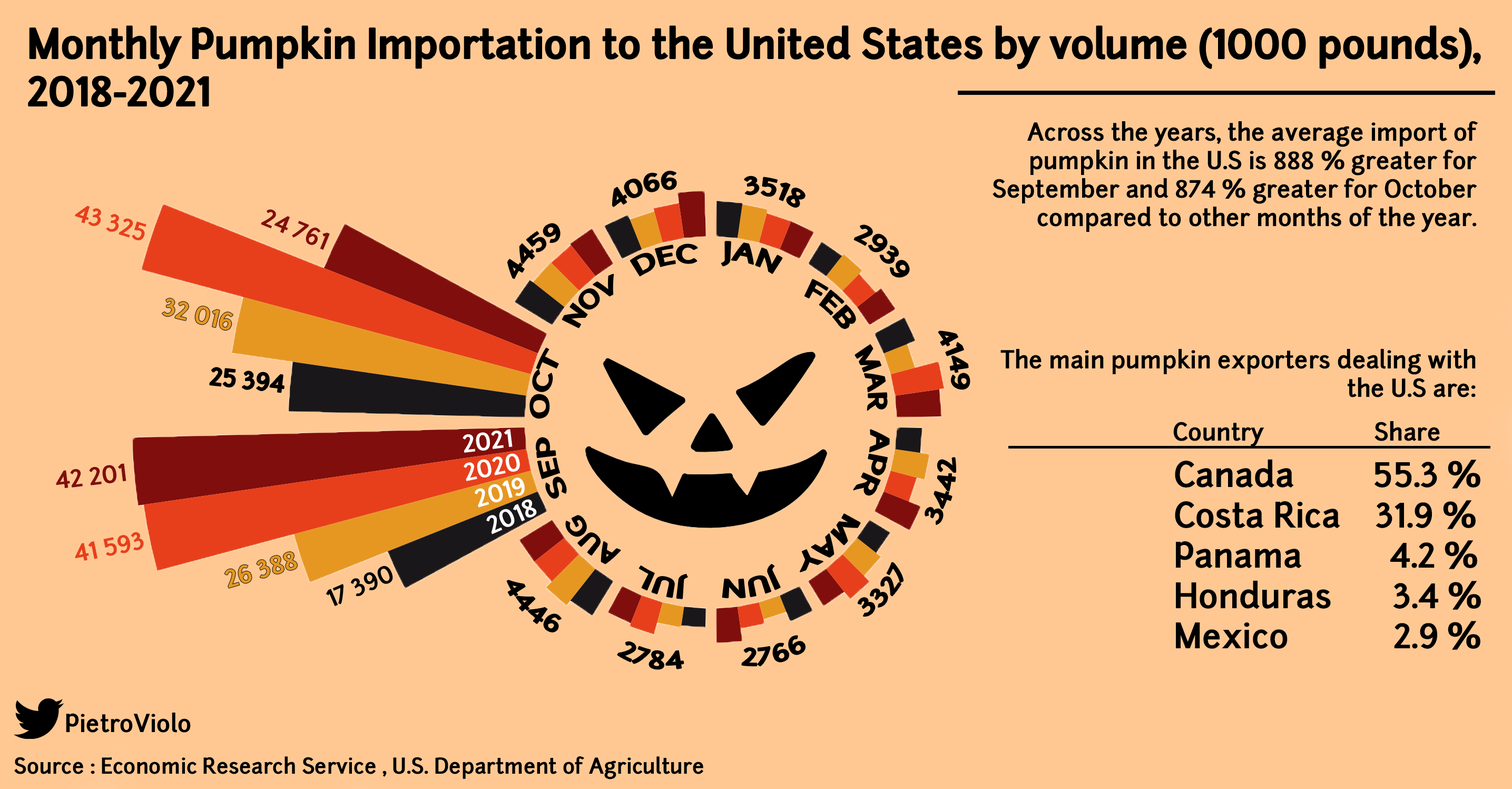
<style>
.page{position:relative;width:1512px;height:789px;background:#ffc893}
.page>*{position:absolute;margin:0}
.t1{font:39.5px "Junction-Bold";color:#000000}
.t2{font:23.7px "Junction-Bold";color:#000000}
.t3{font:23.7px "Junction-Bold";color:#e73f1b}
.t4{font:23.7px "Junction-Bold";color:#800e0c}
.t5{font:23.7px "Junction-Bold";color:#e69722}
.t6{font:23.7px "Junction-Bold";color:#ffffff}
.t7{font:33.6px "Junction-Bold";color:#000000}
.t8{font:21.1px "Junction-Bold";color:#000000}
</style>
<div class="page">
<p class="t1" style="left:28px;top:26px;width:1452px;height:80px">Monthly Pumpkin Importation to the United States by volume (1000 pounds),<br>2018-2021</p>
<p class="t2" style="left:993px;top:121px;width:485px;height:276px;text-align:right">Across the years, the average import of pumpkin in the U.S is 888 % greater for September and 874 % greater for October compared to other months of the year.<br><br><br><br><br>The main pumpkin exporters dealing with the U.S are:</p>
<p class="t2" style="left:612px;top:171px;width:64px;height:36px;rotate:-19deg">4066</p>
<p class="t2" style="left:744px;top:176px;width:61px;height:31px;rotate:16deg">3518</p>
<p class="t3" style="left:75px;top:205px;width:71px;height:35px;rotate:17deg">43 325</p>
<p class="t4" style="left:261px;top:209px;width:69px;height:41px;rotate:22deg">24 761</p>
<p class="t2" style="left:507px;top:223px;width:53px;height:56px;rotate:-43deg">4459</p>
<p class="t2" style="left:854px;top:225px;width:55px;height:52px;rotate:45deg">2939</p>
<p class="t2" style="left:630px;top:244px;width:68px;height:32px;rotate:-15deg">DEC</p>
<p class="t2" style="left:721px;top:241px;width:61px;height:32px;rotate:12deg">JAN</p>
<p class="t2" style="left:562px;top:274px;width:52px;height:54px;rotate:-42deg">NOV</p>
<p class="t2" style="left:804px;top:279px;width:52px;height:50px;rotate:38deg">FEB</p>
<p class="t5" style="left:162px;top:298px;width:71px;height:32px;rotate:13deg">32 016</p>
<p class="t2" style="left:938px;top:331px;width:32px;height:58px;rotate:74deg">4149</p>
<p class="t2" style="left:530px;top:348px;width:28px;height:70px;rotate:-80deg">OCT</p>
<p class="t2" style="left:855px;top:345px;width:32px;height:65px;rotate:77deg">MAR</p>
<p class="t2" style="left:210px;top:367px;width:74px;height:25px;rotate:6deg">25 394</p>
<p class="t2" style="left:1173px;top:421px;width:267px;height:26px">Country                  Share</p>
<p class="t6" style="left:463px;top:429px;width:50px;height:24px;rotate:-7deg">2021</p>
<p class="t2" style="left:536px;top:437px;width:30px;height:61px;rotate:-108deg">SEP</p>
<p class="t2" style="left:853px;top:429px;width:36px;height:66px;rotate:104deg">APR</p>
<p class="t6" style="left:464px;top:453px;width:56px;height:28px;rotate:-12deg">2020</p>
<p class="t2" style="left:925px;top:457px;width:31px;height:68px;rotate:-76deg">3442</p>
<p class="t7" style="left:1175px;top:459px;width:306px;height:191px">Canada         55.3 %<br>Costa Rica    31.9 %<br>Panama          4.2 %<br>Honduras       3.4 %<br>Mexico            2.9 %</p>
<p class="t4" style="left:56px;top:463px;width:70px;height:25px;rotate:-7deg">42 201</p>
<p class="t6" style="left:475px;top:477px;width:50px;height:30px;rotate:-16deg">2019</p>
<p class="t6" style="left:486px;top:499px;width:51px;height:35px;rotate:-24deg">2018</p>
<p class="t2" style="left:566px;top:515px;width:55px;height:49px;rotate:-137deg">AUG</p>
<p class="t2" style="left:800px;top:514px;width:60px;height:58px;rotate:140deg">MAY</p>
<p class="t3" style="left:75px;top:532px;width:69px;height:29px;rotate:-12deg">41 593</p>
<p class="t5" style="left:225px;top:552px;width:72px;height:36px;rotate:-16deg">26 388</p>
<p class="t2" style="left:326px;top:565px;width:67px;height:41px;rotate:-24deg">17 390</p>
<p class="t2" style="left:639px;top:565px;width:49px;height:33px;rotate:-168deg">JUL</p>
<p class="t2" style="left:722px;top:564px;width:58px;height:33px;rotate:166deg">JUN</p>
<p class="t2" style="left:858px;top:562px;width:45px;height:54px;rotate:-48deg">3327</p>
<p class="t2" style="left:507px;top:580px;width:54px;height:52px;rotate:44deg">4446</p>
<p class="t2" style="left:617px;top:641px;width:67px;height:28px;rotate:11deg">2784</p>
<p class="t2" style="left:742px;top:635px;width:64px;height:31px;rotate:-15deg">2766</p>
<p class="t2" style="left:66px;top:712px;width:125px;height:20px">PietroViolo</p>
<p class="t8" style="left:14px;top:756px;width:689px;height:23px">Source : Economic Research Service , U.S. Department of Agriculture</p>
</div>
